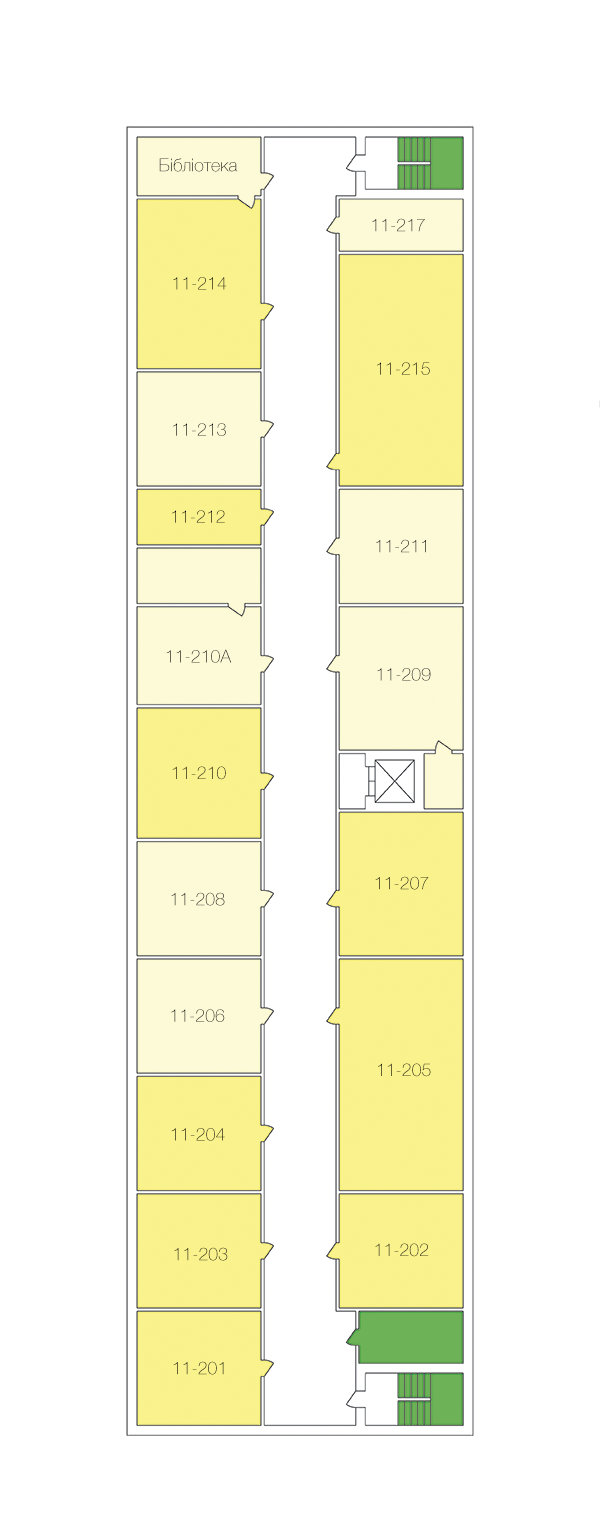
<style>
.page{position:relative;width:600px;height:1524px;background:#ffffff}
.page>*{position:absolute;margin:0}
.t1{font:17.8px "HelveticaNeueCyr-Thin"}
.t2{font:17.8px "HelveticaNeueCyr-Thin";color:#000000}
</style>
<div class="page">
<p class="t1" style="left:159px;top:158px;width:79px;height:14px">Бібліотека</p>
<p class="t1" style="left:372px;top:218px;width:53px;height:14px">11-217</p>
<p class="t1" style="left:173px;top:277px;width:54px;height:13px">11-214</p>
<p class="t2" style="left:377px;top:362px;width:53px;height:13px">11-215</p>
<p class="t2" style="left:173px;top:423px;width:53px;height:13px">11-213</p>
<p class="t2" style="left:172px;top:510px;width:53px;height:13px">11-212</p>
<p class="t1" style="left:376px;top:539px;width:50px;height:14px">11-211</p>
<p class="t1" style="left:166px;top:649px;width:66px;height:14px">11-210А</p>
<p class="t1" style="left:377px;top:668px;width:54px;height:13px">11-209</p>
<p class="t1" style="left:172px;top:766px;width:54px;height:14px">11-210</p>
<p class="t1" style="left:375px;top:876px;width:54px;height:14px">11-207</p>
<p class="t1" style="left:171px;top:892px;width:54px;height:14px">11-208</p>
<p class="t1" style="left:171px;top:1009px;width:54px;height:13px">11-206</p>
<p class="t1" style="left:378px;top:1063px;width:53px;height:14px">11-205</p>
<p class="t1" style="left:171px;top:1128px;width:54px;height:13px">11-204</p>
<p class="t1" style="left:174px;top:1247px;width:54px;height:14px">11-203</p>
<p class="t1" style="left:375px;top:1243px;width:54px;height:14px">11-202</p>
<p class="t1" style="left:173px;top:1361px;width:51px;height:14px">11-201</p>
</div>
